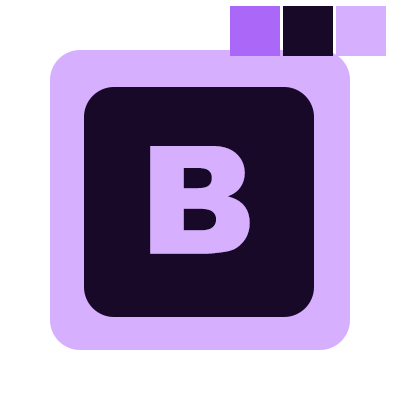
<style>
.page{position:relative;width:400px;height:400px;background:#ffffff}
.page>*{position:absolute;margin:0}
.t1{font:150px "Arial-Black";letter-spacing:-0.02em;color:#d7afff}
</style>
<div class="page">
<p class="t1" style="left:150px;top:146px;width:100px;height:108px">B</p>
</div>
